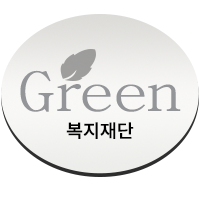
<style>
.page{position:relative;width:200px;height:200px;background:#ffffff}
.page>*{position:absolute;margin:0}
.t1{font:54px "BatangChe";color:#939598;scale:1.26 1}
.t2{font:18.3px "NotoSansKR-Medium";color:#000000}
</style>
<div class="page">
<p class="t1" style="left:20px;top:70px;width:161px;height:42px">Green</p>
<p class="t2" style="left:66px;top:122px;width:68px;height:17px">복지재단</p>
</div>
